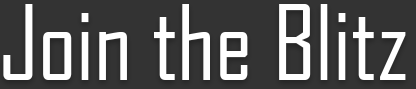
<style>
.page{position:relative;width:416px;height:89px;background:#333333}
.page>*{position:absolute;margin:0}
.t1{font:100.3px "AgencyFB-Reg";color:#ffffff}
</style>
<div class="page">
<p class="t1" style="left:3px;top:4px;width:403px;height:76px">Join the Blitz</p>
</div>
